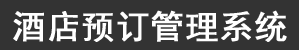
<style>
.page{position:relative;width:299px;height:50px;background:#333333}
.page>*{position:absolute;margin:0}
.t1{font:33px "SimHei";letter-spacing:0.02em;color:#ffffff;font-weight:bold}
</style>
<div class="page">
<p class="t1" style="left:13px;top:10px;width:274px;height:32px">酒店预订管理系统</p>
</div>
